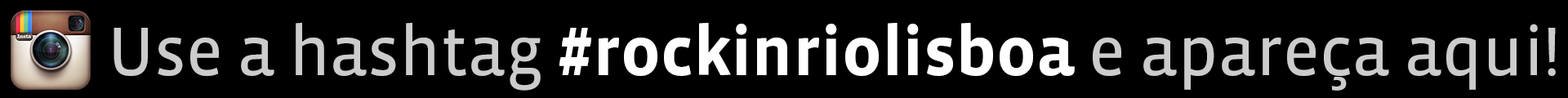
<style>
.page{position:relative;width:1568px;height:98px;background:#000000}
.page>*{position:absolute;margin:0}
.t1{font:70.2px "VistaSansOT-Bold";color:#ffffff}
.t2{font:70.2px "VistaSansOT-Reg";color:#cccccc}
</style>
<div class="page">
<p class="t1" style="left:114px;top:23px;width:1442px;height:68px"><span class="t2">Use a hashtag </span>#rockinriolisboa <span class="t2">e apareça aqui!</span></p>
</div>
